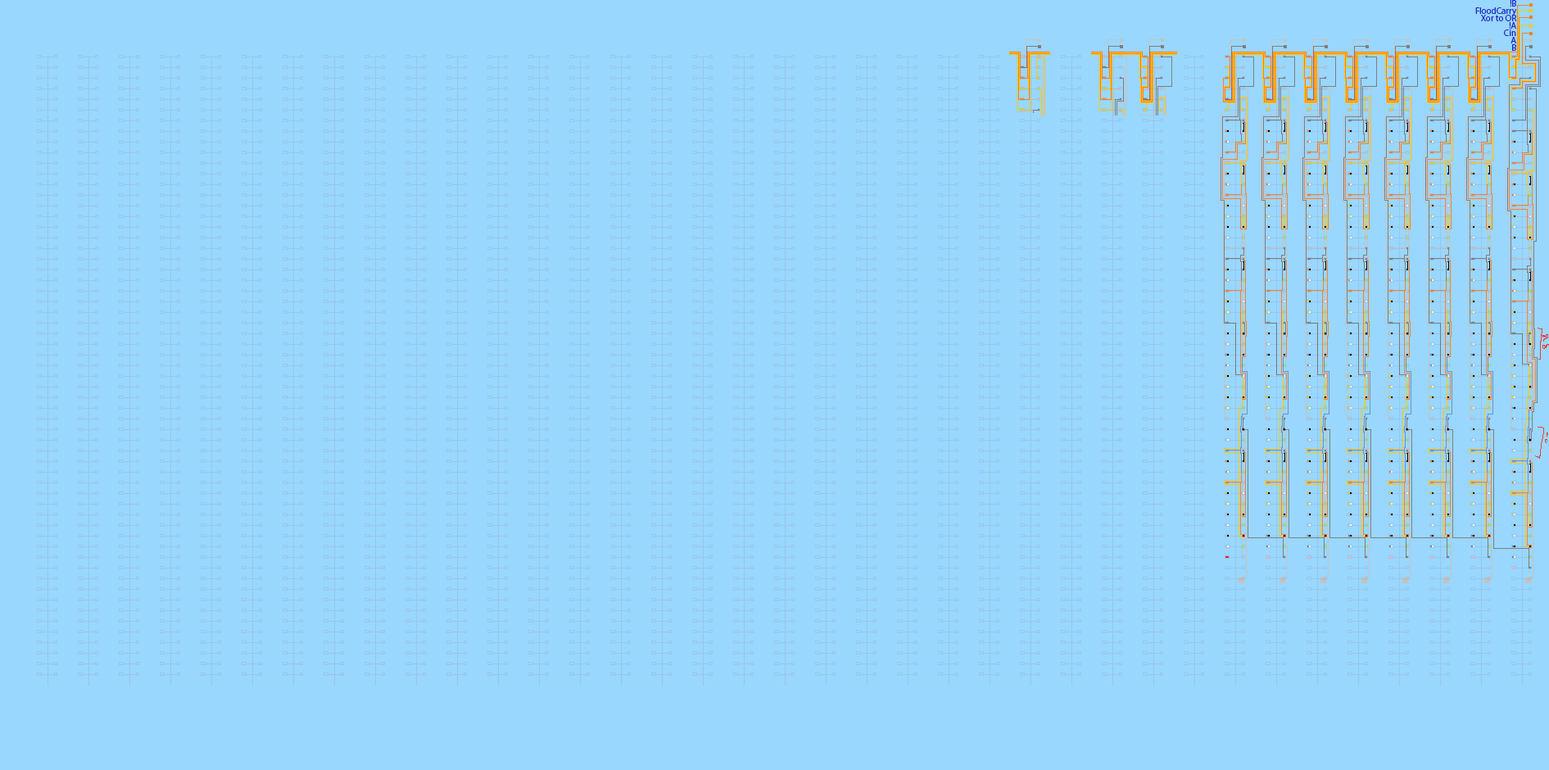
<style>
.page{position:relative;width:1549px;height:770px;background:#99d7ff}
.page>*{position:absolute;margin:0}
.t1{font:9px/7.4px "MyriadPro-Regular";color:#1f27c6}
</style>
<div class="page">
<p class="t1" style="left:1475px;top:0px;width:42px;height:51px;text-align:right">!B<br>FloodCarry<br>Xor to OR<br>!A<br>Cin<br>A<br>B</p>
</div>
